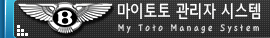
<style>
.page{position:relative;width:270px;height:38px}
.page>*{position:absolute;margin:0}
.t1{font:19.2px "SJÁ¤±Û°íµñ";color:#ffffff;scale:0.83 1}
.t2{font:10.8px "SJÁÖ¸ñ³ª¹«";letter-spacing:0.3em;color:#e0e0e0;scale:0.83 1}
</style>
<div class="page">
<p class="t1" style="left:117px;top:3px;width:144px;height:17px">마이토토 관리자 시스템</p>
<p class="t2" style="left:118px;top:24px;width:141px;height:10px">My Toto Manage System</p>
</div>
